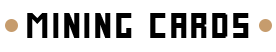
<style>
.page{position:relative;width:276px;height:52px;background:#ffffff}
.page>*{position:absolute;margin:0}
.t1{font:34px "FutureMillennium";letter-spacing:-0.025em;color:#000000}
</style>
<div class="page">
<p class="t1" style="left:27px;top:13px;width:105px;height:25px">MINING</p>
<p class="t1" style="left:150px;top:13px;width:99px;height:25px">CARDS</p>
</div>
